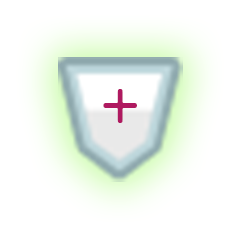
<style>
.page{position:relative;width:240px;height:240px;background:#ffffff}
.page>*{position:absolute;margin:0}
.t1{font:59.9px "LazenbyComputer-Smooth";color:#af1960}
</style>
<div class="page">
<p class="t1" style="left:103px;top:89px;width:34px;height:34px">+</p>
</div>
